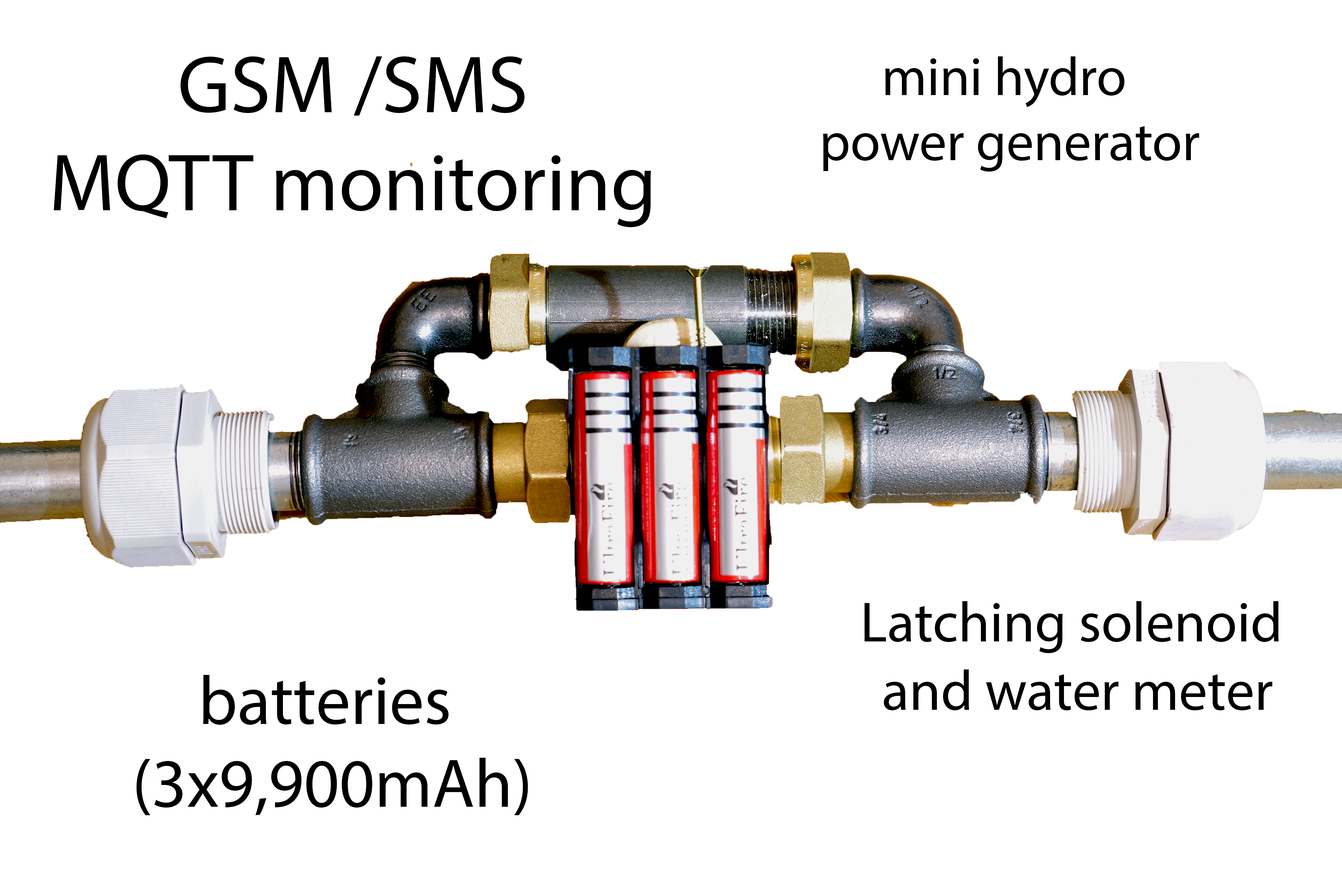
<style>
.page{position:relative;width:1342px;height:889px;background:#ffffff}
.page>*{position:absolute;margin:0}
.t1{font:81.7px "MyriadPro-Regular";color:#000000}
.t2{font:54.4px "MyriadPro-Regular";color:#000000}
.t3{font:56.9px "MyriadPro-Regular";color:#000000}
.t4{font:69px "MyriadPro-Regular";color:#000000}
</style>
<div class="page">
<p class="t1" style="left:54px;top:56px;width:597px;height:171px;text-align:center">GSM /SMS<br>MQTT monitoring</p>
<p class="t2" style="left:823px;top:56px;width:376px;height:116px;text-align:center">mini hydro <br>power generator</p>
<p class="t3" style="left:864px;top:601px;width:415px;height:109px;text-align:center">Latching solenoid <br>and water meter</p>
<p class="t4" style="left:136px;top:675px;width:392px;height:140px;text-align:center">batteries <br>(3x9,900mAh)</p>
</div>
